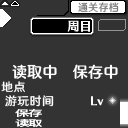
<style>
.page{position:relative;width:128px;height:128px;background:#333333}
.page>*{position:absolute;margin:0}
.t1{font:10.5px "HYWenHei-FEW";letter-spacing:0.025em;color:#787878;scale:0.95 1}
.t2{font:15px "FZFW-QingYinTiS-B--GB1-0";letter-spacing:0.025em;color:#ffffff}
.t3{font:12px "HYWenHei-FEW";letter-spacing:0.025em;color:#ffffff}
.t4{font:8.4px "DFKingGothicSC14-Semibold";letter-spacing:-0.075em;color:#ffffff;scale:1.71 1}
</style>
<div class="page">
<p class="t1" style="left:78px;top:2px;width:41px;height:11px">通关存档</p>
<p class="t2" style="left:12px;top:64px;width:45px;height:15px">读取中</p>
<p class="t2" style="left:73px;top:64px;width:45px;height:15px">保存中</p>
<p class="t3" style="left:1px;top:81px;width:24px;height:12px">地点</p>
<p class="t3" style="left:5px;top:95px;width:49px;height:12px">游玩时间</p>
<p class="t4" style="left:15px;top:108px;width:27px;height:9px">保存</p>
</div>
